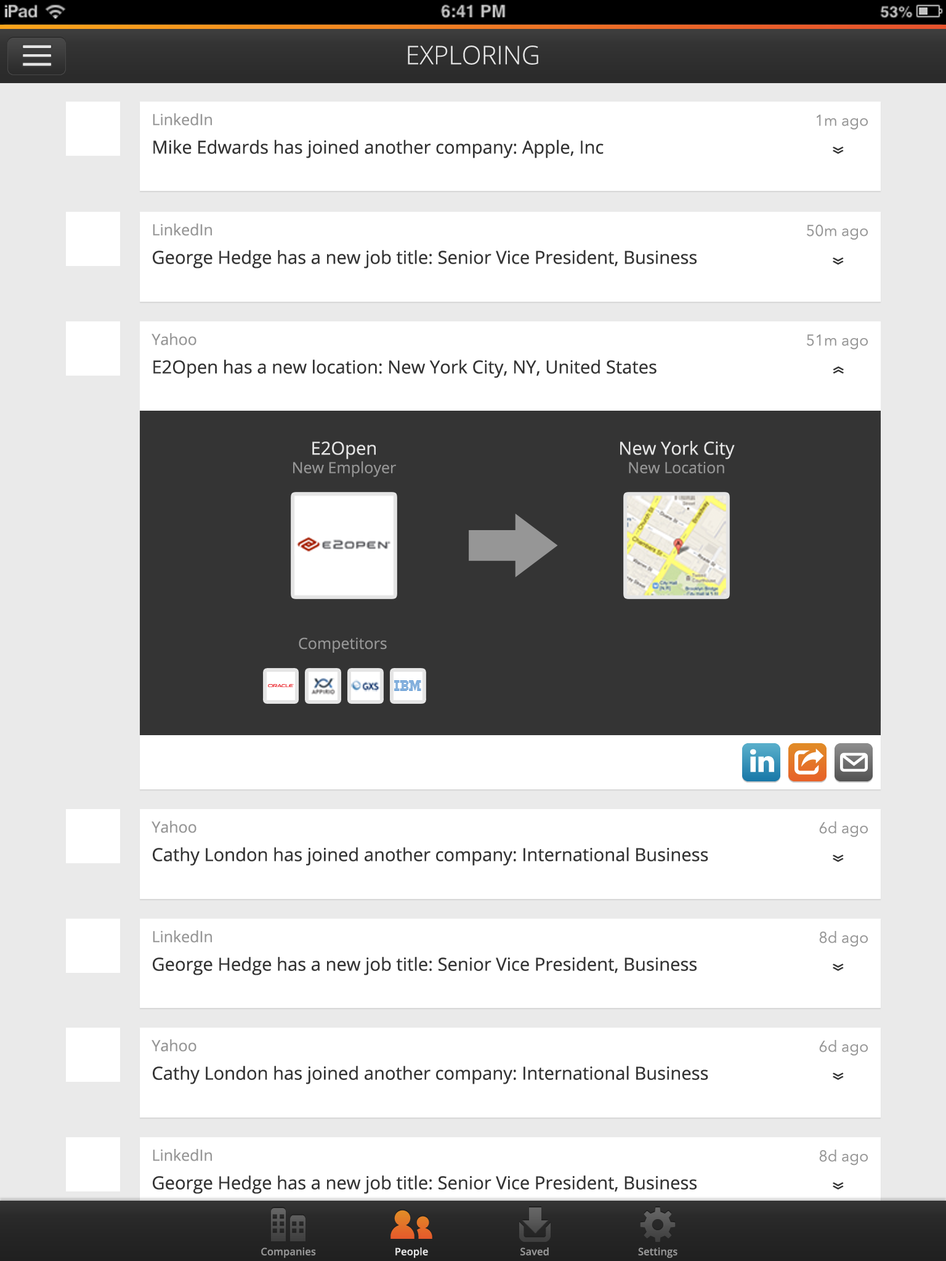
<style>
.page{position:relative;width:946px;height:1261px;background:#ffffff}
.page>*{position:absolute;margin:0}
.t1{font:25.7px "OpenSans-Light";color:#e5e5e5}
.t2{font:18px "OpenSans";color:#343434}
.t3{font:15.4px "OpenSans";color:#969696}
.t4{font:15.4px "AvenirNext-Regular";color:#969696}
.t5{font:25.7px "OpenSans";color:#343434;scale:0.64 1}
.t6{font:18px "OpenSans";color:#e5e5e5}
.t7{font:10.3px "OpenSans-Semibold";color:#969696}
.t8{font:10.3px "OpenSans-Semibold";color:#e5e5e5}
</style>
<div class="page">
<p class="t1" style="left:408px;top:46px;width:130px;height:19px">EXPLORING</p>
<p class="t2" style="left:153px;top:113px;width:450px;height:45px"><span class="t3">LinkedIn<br></span>Mike Edwards has joined another company: Apple, Inc</p>
<p class="t4" style="left:816px;top:115px;width:51px;height:15px">1m ago</p>
<p class="t5" style="left:832px;top:147px;width:11px;height:7px;rotate:90deg">»</p>
<p class="t2" style="left:153px;top:223px;width:543px;height:45px"><span class="t3">LinkedIn<br></span>George Hedge has a new job title: Senior Vice President, Business Development</p>
<p class="t4" style="left:807px;top:224px;width:60px;height:16px">50m ago</p>
<p class="t5" style="left:832px;top:257px;width:11px;height:8px;rotate:90deg">»</p>
<p class="t2" style="left:151px;top:333px;width:505px;height:45px"><span class="t3">Yahoo<br></span>E2Open has a new location: New York City, NY, United States</p>
<p class="t4" style="left:807px;top:334px;width:60px;height:16px">51m ago</p>
<p class="t5" style="left:832px;top:366px;width:11px;height:8px;rotate:-90deg">»</p>
<p class="t3" style="left:293px;top:441px;width:103px;height:36px;text-align:center"><span class="t6">E2Open<br></span>New Employer</p>
<p class="t6" style="left:620px;top:441px;width:115px;height:32px;text-align:center">New York City<br><span class="t3">New Location</span></p>
<p class="t3" style="left:299px;top:637px;width:88px;height:16px">Competitors</p>
<p class="t2" style="left:151px;top:821px;width:557px;height:45px"><span class="t3">Yahoo<br></span>Cathy London has joined another company: International Business Machines</p>
<p class="t4" style="left:819px;top:821px;width:48px;height:16px">6d ago</p>
<p class="t5" style="left:832px;top:855px;width:11px;height:7px;rotate:90deg">»</p>
<p class="t2" style="left:153px;top:930px;width:543px;height:45px"><span class="t3">LinkedIn<br></span>George Hedge has a new job title: Senior Vice President, Business</p>
<p class="t4" style="left:819px;top:931px;width:48px;height:16px">8d ago</p>
<p class="t5" style="left:832px;top:964px;width:11px;height:7px;rotate:90deg">»</p>
<p class="t2" style="left:151px;top:1039px;width:557px;height:45px"><span class="t3">Yahoo<br></span>Cathy London has joined another company: International Business Machines</p>
<p class="t4" style="left:819px;top:1040px;width:48px;height:16px">6d ago</p>
<p class="t5" style="left:832px;top:1073px;width:11px;height:7px;rotate:90deg">»</p>
<p class="t2" style="left:153px;top:1149px;width:543px;height:45px"><span class="t3">LinkedIn<br></span>George Hedge has a new job title: Senior Vice President, Business</p>
<p class="t4" style="left:819px;top:1149px;width:48px;height:16px">8d ago</p>
<p class="t5" style="left:832px;top:1182px;width:11px;height:7px;rotate:90deg">»</p>
<p class="t7" style="left:261px;top:1247px;width:55px;height:11px">Companies</p>
<p class="t8" style="left:395px;top:1247px;width:33px;height:11px">People</p>
<p class="t7" style="left:520px;top:1247px;width:29px;height:8px">Saved</p>
<p class="t7" style="left:638px;top:1247px;width:39px;height:11px">Settings</p>
</div>
